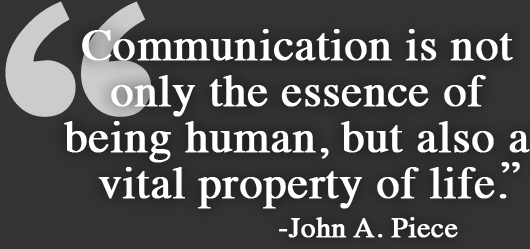
<style>
.page{position:relative;width:530px;height:249px;background:#333333}
.page>*{position:absolute;margin:0}
.t1{font:45.8px/45.8px "Times-Roman";color:#ffffff;font-weight:bold}
.t2{font:45.8px "Times-Roman";color:#ffffff;font-weight:bold}
.t3{font:29.2px "Times-Roman";color:#ffffff;font-weight:bold}
</style>
<div class="page">
<p class="t1" style="left:64px;top:29px;width:466px;height:180px;text-align:center">Communication is not <br>only the essence of <br>being human, but also a <br>vital property of life.</p>
<p class="t2" style="left:501px;top:162px;width:19px;height:11px">”</p>
<p class="t3" style="left:279px;top:217px;width:179px;height:21px">-John A. Piece</p>
</div>
